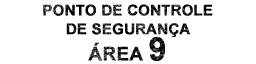
<style>
.page{position:relative;width:256px;height:64px;background:#ffffff}
.page>*{position:absolute;margin:0}
.t1{font:14.8px/18.7px "Arial-BoldMT";letter-spacing:0.005em;color:#131313;text-transform:uppercase;font-weight:bold}
.t2{font:18.7px "Arial-BoldMT";letter-spacing:0.005em;text-transform:uppercase;font-weight:bold}
.t3{font:32px "Arial-BoldMT";letter-spacing:0.005em;text-transform:uppercase;font-weight:bold}
</style>
<div class="page">
<p class="t1" style="left:43px;top:4px;width:170px;height:33px;text-align:center">ponto de controle<br>de segurança</p>
<p class="t2" style="left:88px;top:36px;width:77px;height:25px">área <span class="t3">9</span></p>
</div>
